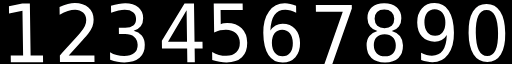
<style>
.page{position:relative;width:512px;height:64px;background:#000000}
.page>*{position:absolute;margin:0}
.t1{font:80.8px "DejaVuSans";color:#ffffff;scale:0.95 1}
.t2{font:79.4px "DejaVuSans";color:#ffffff;scale:0.94 1}
.t3{font:78.1px "DejaVuSans";color:#ffffff;scale:0.93 1}
.t4{font:76.9px "DejaVuSans";color:#ffffff;scale:0.95 1}
</style>
<div class="page">
<p class="t1" style="left:8px;top:3px;width:36px;height:60px">1</p>
<p class="t2" style="left:59px;top:3px;width:36px;height:60px">2</p>
<p class="t3" style="left:110px;top:3px;width:35px;height:60px">3</p>
<p class="t1" style="left:161px;top:3px;width:42px;height:60px">4</p>
<p class="t2" style="left:212px;top:3px;width:36px;height:60px">5</p>
<p class="t3" style="left:263px;top:3px;width:38px;height:60px">6</p>
<p class="t1" style="left:315px;top:5px;width:37px;height:59px">7</p>
<p class="t3" style="left:366px;top:3px;width:38px;height:60px">8</p>
<p class="t3" style="left:417px;top:3px;width:38px;height:60px">9</p>
<p class="t4" style="left:468px;top:3px;width:38px;height:60px">0</p>
</div>
